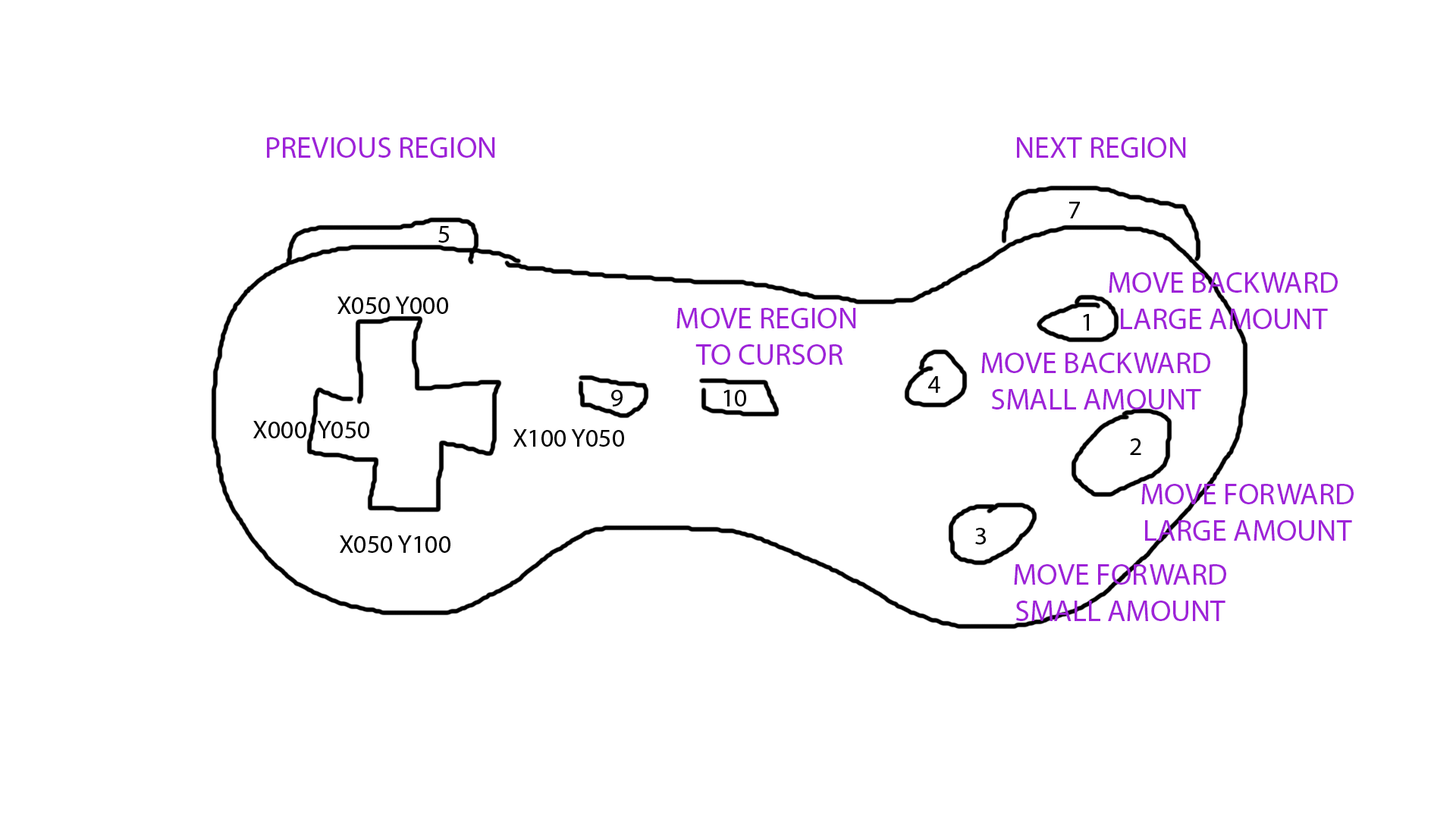
<style>
.page{position:relative;width:1456px;height:819px;background:#ffffff}
.page>*{position:absolute;margin:0}
.t1{font:30.3px "MyriadPro-Regular";color:#9e22d8;text-transform:uppercase}
</style>
<div class="page">
<p class="t1" style="left:267px;top:137px;width:228px;height:21px">PREVIOUS Region</p>
<p class="t1" style="left:1017px;top:137px;width:169px;height:21px">Next Region</p>
<p class="t1" style="left:1109px;top:272px;width:229px;height:57px;text-align:center">Move Backward<br>Large amount</p>
<p class="t1" style="left:676px;top:308px;width:180px;height:57px;text-align:center">Move Region <br>to Cursor</p>
<p class="t1" style="left:981px;top:353px;width:229px;height:56px;text-align:center">Move backward<br>Small amount</p>
<p class="t1" style="left:1141px;top:484px;width:213px;height:57px;text-align:center">Move forward<br>Large amount</p>
<p class="t1" style="left:1014px;top:564px;width:212px;height:57px;text-align:center">Move forward<br>Small amount</p>
</div>
